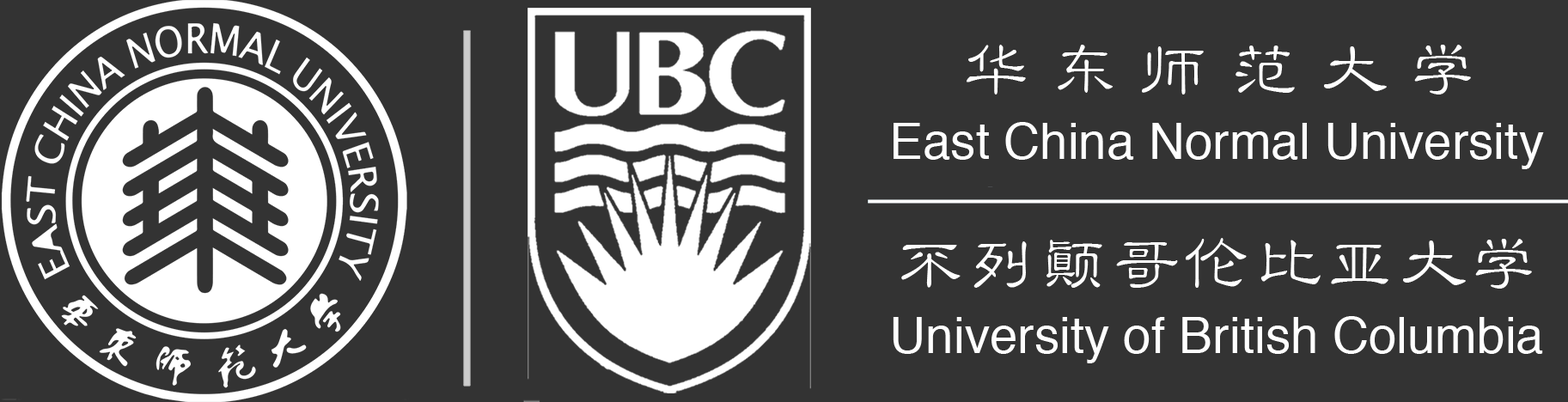
<style>
.page{position:relative;width:1568px;height:402px;background:#333333}
.page>*{position:absolute;margin:0}
.t1{font:71.6px "STLibian-SC-Regular";color:#ffffff}
.t2{font:50.1px "Helvetica";color:#ffffff}
</style>
<div class="page">
<p class="t1" style="left:967px;top:45px;width:504px;height:50px">华 东 师 范 大 学</p>
<p class="t2" style="left:894px;top:122px;width:650px;height:47px">East China Normal University</p>
<p class="t1" style="left:901px;top:238px;width:631px;height:51px">不列颠哥伦比亚大学</p>
<p class="t2" style="left:893px;top:316px;width:650px;height:47px">University of British Columbia</p>
</div>
